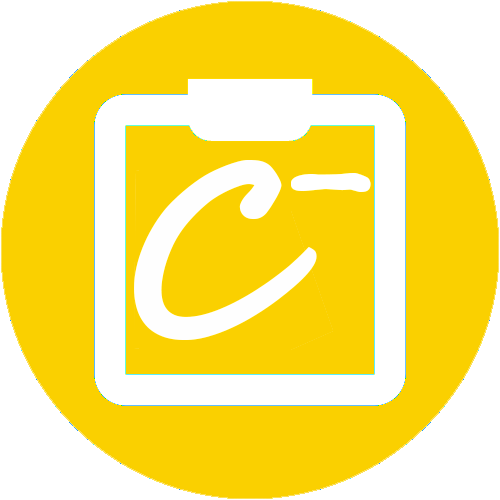
<style>
.page{position:relative;width:500px;height:500px;background:#fad000}
.page>*{position:absolute;margin:0}
.t1{font:233.3px "SegoeScript-Bold";color:#fefefe}
</style>
<div class="page">
<p class="t1" style="left:134px;top:160px;width:183px;height:180px">C</p>
</div>
